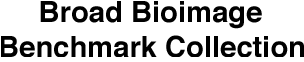
<style>
.page{position:relative;width:304px;height:62px;background:#ffffff}
.page>*{position:absolute;margin:0}
.t1{font:29.2px "Helvetica-Bold";color:#000000}
</style>
<div class="page">
<p class="t1" style="left:1px;top:1px;width:303px;height:56px">Broad Bioimage<br>Benchmark Collection</p>
</div>
